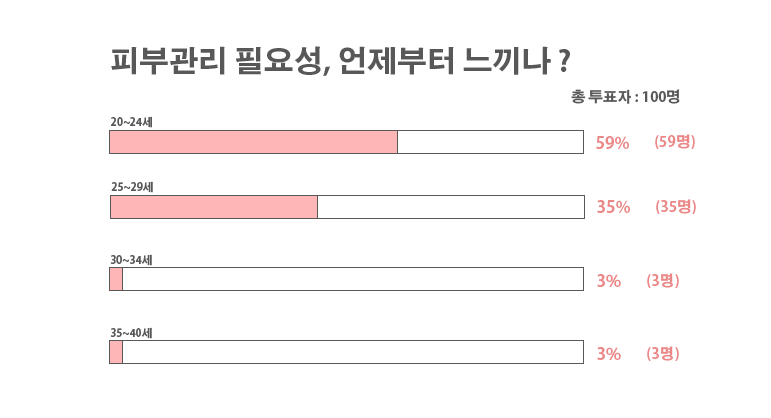
<style>
.page{position:relative;width:771px;height:418px;background:#ffffff}
.page>*{position:absolute;margin:0}
.t1{font:29.6px "AdobeGothicStd-Bold";color:#585858}
.t2{font:14.4px "AdobeGothicStd-Bold";color:#585858}
.t3{font:10.8px "AdobeGothicStd-Bold";color:#585858}
.t4{font:16.6px "AdobeGothicStd-Bold";color:#eb8787}
.t5{font:14.7px "AdobeGothicStd-Bold";color:#eb8787}
</style>
<div class="page">
<p class="t1" style="left:111px;top:46px;width:459px;height:30px">피부관리 필요성, 언제부터 느끼나 ?</p>
<p class="t2" style="left:571px;top:89px;width:109px;height:15px">총 투표자 : 100명</p>
<p class="t3" style="left:111px;top:116px;width:42px;height:12px">20~24세</p>
<p class="t4" style="left:596px;top:136px;width:33px;height:13px">59%</p>
<p class="t5" style="left:655px;top:134px;width:40px;height:15px">(59명)</p>
<p class="t3" style="left:111px;top:181px;width:42px;height:12px">25~29세</p>
<p class="t4" style="left:597px;top:200px;width:33px;height:13px">35%</p>
<p class="t5" style="left:656px;top:199px;width:40px;height:15px">(35명)</p>
<p class="t3" style="left:110px;top:254px;width:42px;height:12px">30~34세</p>
<p class="t4" style="left:597px;top:274px;width:24px;height:13px">3%</p>
<p class="t5" style="left:647px;top:273px;width:32px;height:15px">(3명)</p>
<p class="t3" style="left:110px;top:327px;width:42px;height:12px">35~40세</p>
<p class="t4" style="left:597px;top:347px;width:24px;height:13px">3%</p>
<p class="t5" style="left:647px;top:346px;width:32px;height:15px">(3명)</p>
</div>
